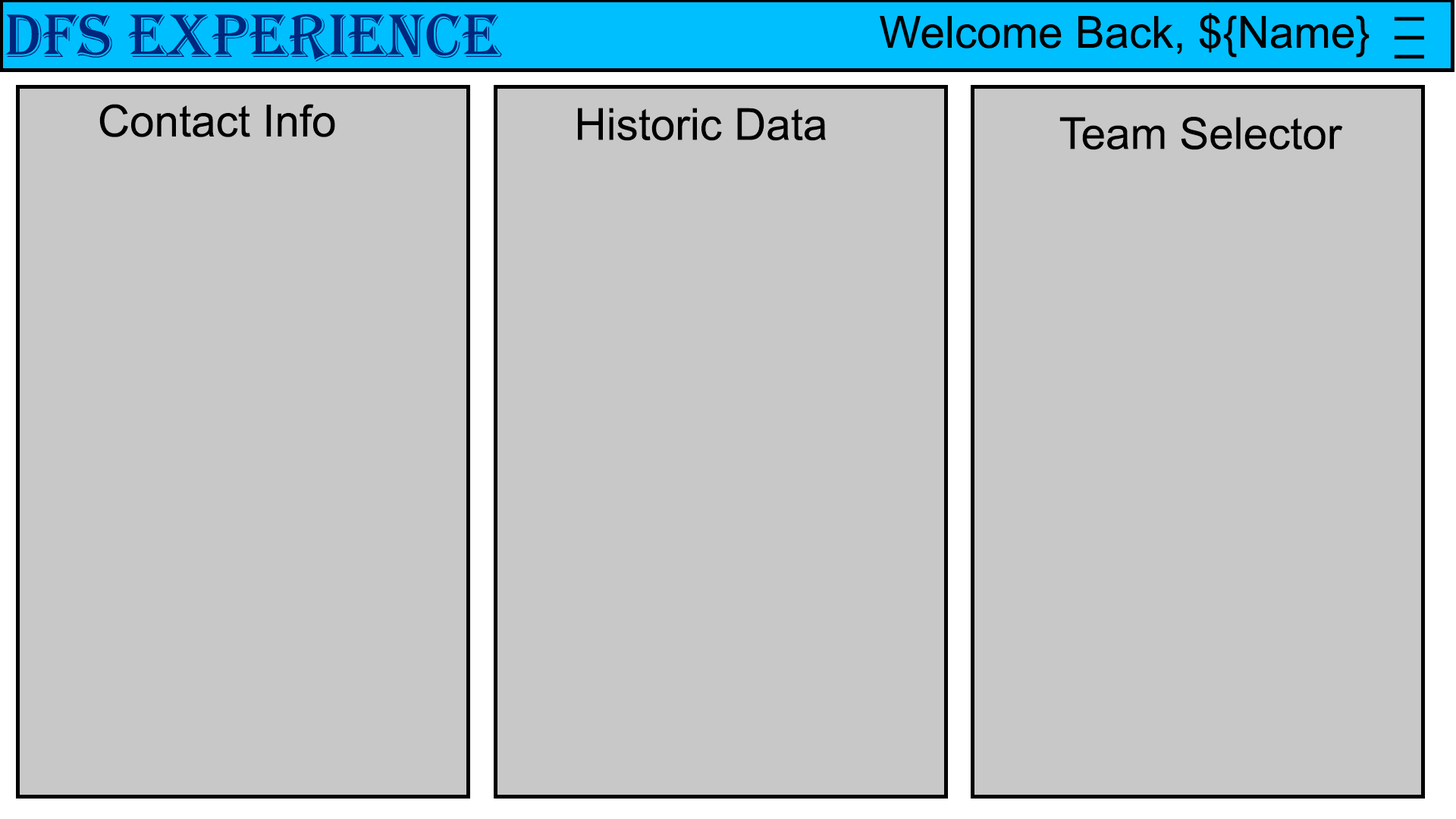
<style>
.page{position:relative;width:1456px;height:819px;background:#c8c8c8}
.page>*{position:absolute;margin:0}
.t1{font:63.2px "Algerian";color:#00267d}
.t2{font:44.2px "ArialMT";color:#000000}
.t3{font:63.2px/19px "Algerian";color:#000000}
</style>
<div class="page">
<p class="t1" style="left:5px;top:14px;width:497px;height:47px">DFS Experience</p>
<p class="t2" style="left:880px;top:13px;width:490px;height:45px">Welcome Back, ${Name}</p>
<p class="t3" style="left:1394px;top:17px;width:30px;height:42px">_<br>_<br>_</p>
<p class="t2" style="left:99px;top:104px;width:236px;height:33px">Contact Info</p>
<p class="t2" style="left:578px;top:108px;width:248px;height:33px">Historic Data</p>
<p class="t2" style="left:1059px;top:117px;width:284px;height:33px">Team Selector</p>
</div>
